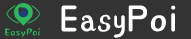
<style>
.page{position:relative;width:191px;height:39px;background:#333333}
.page>*{position:absolute;margin:0}
.t1{font:37.9px "xiaowei";color:#ffffff}
</style>
<div class="page">
<p class="t1" style="left:61px;top:5px;width:115px;height:33px">EasyPoi</p>
</div>
